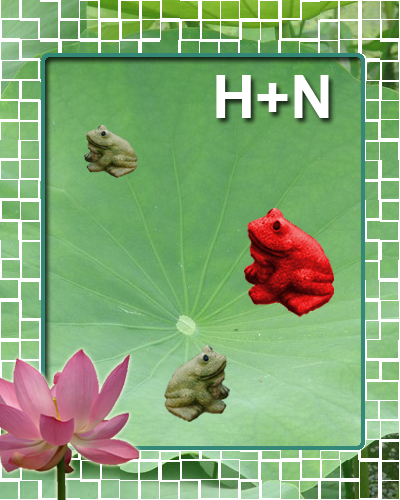
<style>
.page{position:relative;width:400px;height:500px}
.page>*{position:absolute;margin:0}
.t1{font:60px "Arial-BoldMT";color:#ffffff}
</style>
<div class="page">
<p class="t1" style="left:216px;top:75px;width:113px;height:43px">H+N</p>
</div>
